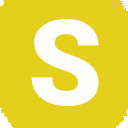
<style>
.page{position:relative;width:128px;height:128px;background:#e4cf1b}
.page>*{position:absolute;margin:0}
.t1{font:119px "Roboto-Black";color:#fdfdfa}
</style>
<div class="page">
<p class="t1" style="left:31px;top:19px;width:68px;height:87px">S</p>
</div>
